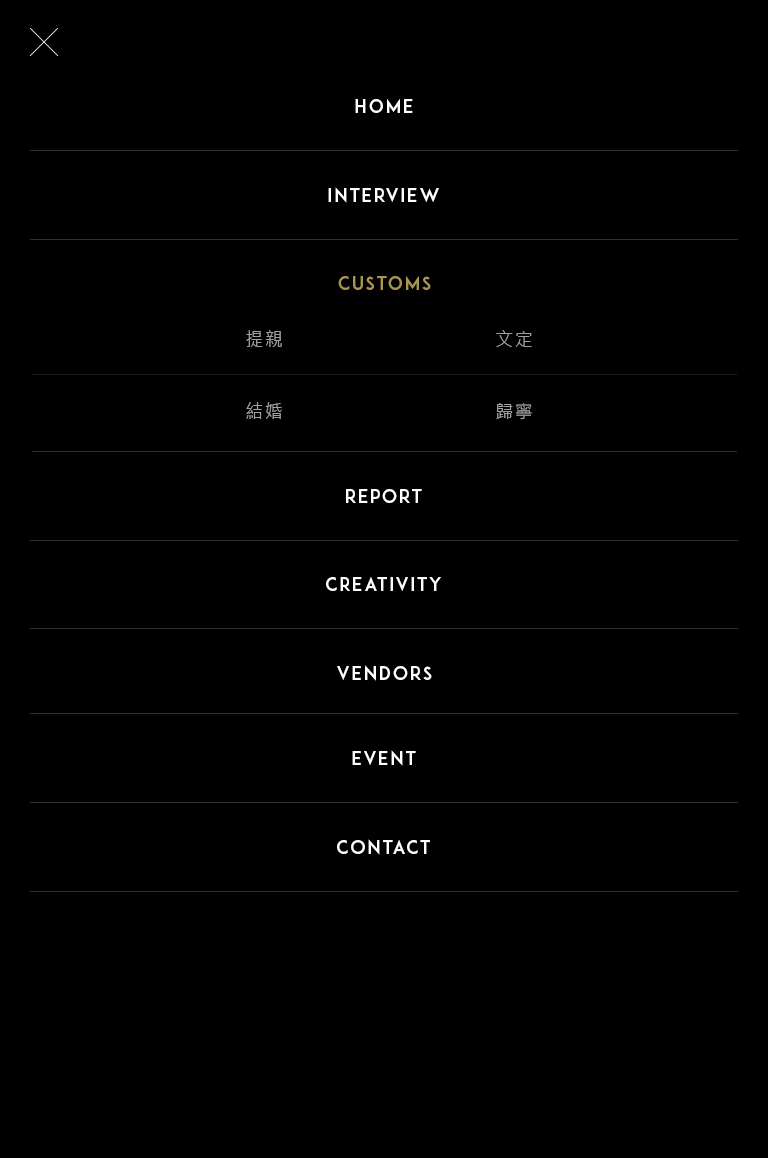
<style>
.page{position:relative;width:768px;height:1158px;background:#000000}
.page>*{position:absolute;margin:0}
.t1{font:18px "ADAM.CGPRO";letter-spacing:0.1em;color:#ffffff}
.t2{font:18px "ADAM.CGPRO";letter-spacing:0.1em;color:#a99655}
.t3{font:18px/72px "MicrosoftJhengHeiRegular";letter-spacing:0.08em;color:#a0a0a0}
</style>
<div class="page">
<p class="t1" style="left:355px;top:99px;width:58px;height:14px">HOME</p>
<p class="t1" style="left:328px;top:187px;width:111px;height:16px">INTERVIEW</p>
<p class="t2" style="left:338px;top:276px;width:93px;height:14px">cUSTOMS</p>
<p class="t3" style="left:246px;top:330px;width:36px;height:89px;text-align:center">提親<br>結婚</p>
<p class="t3" style="left:496px;top:330px;width:36px;height:90px;text-align:center">文定<br>歸寧</p>
<p class="t1" style="left:346px;top:489px;width:76px;height:14px">report</p>
<p class="t1" style="left:326px;top:577px;width:115px;height:14px">cREATIVITY</p>
<p class="t1" style="left:337px;top:665px;width:95px;height:16px">vendors</p>
<p class="t1" style="left:352px;top:750px;width:64px;height:16px">EVENT</p>
<p class="t1" style="left:337px;top:839px;width:93px;height:16px">CONTACT</p>
</div>
